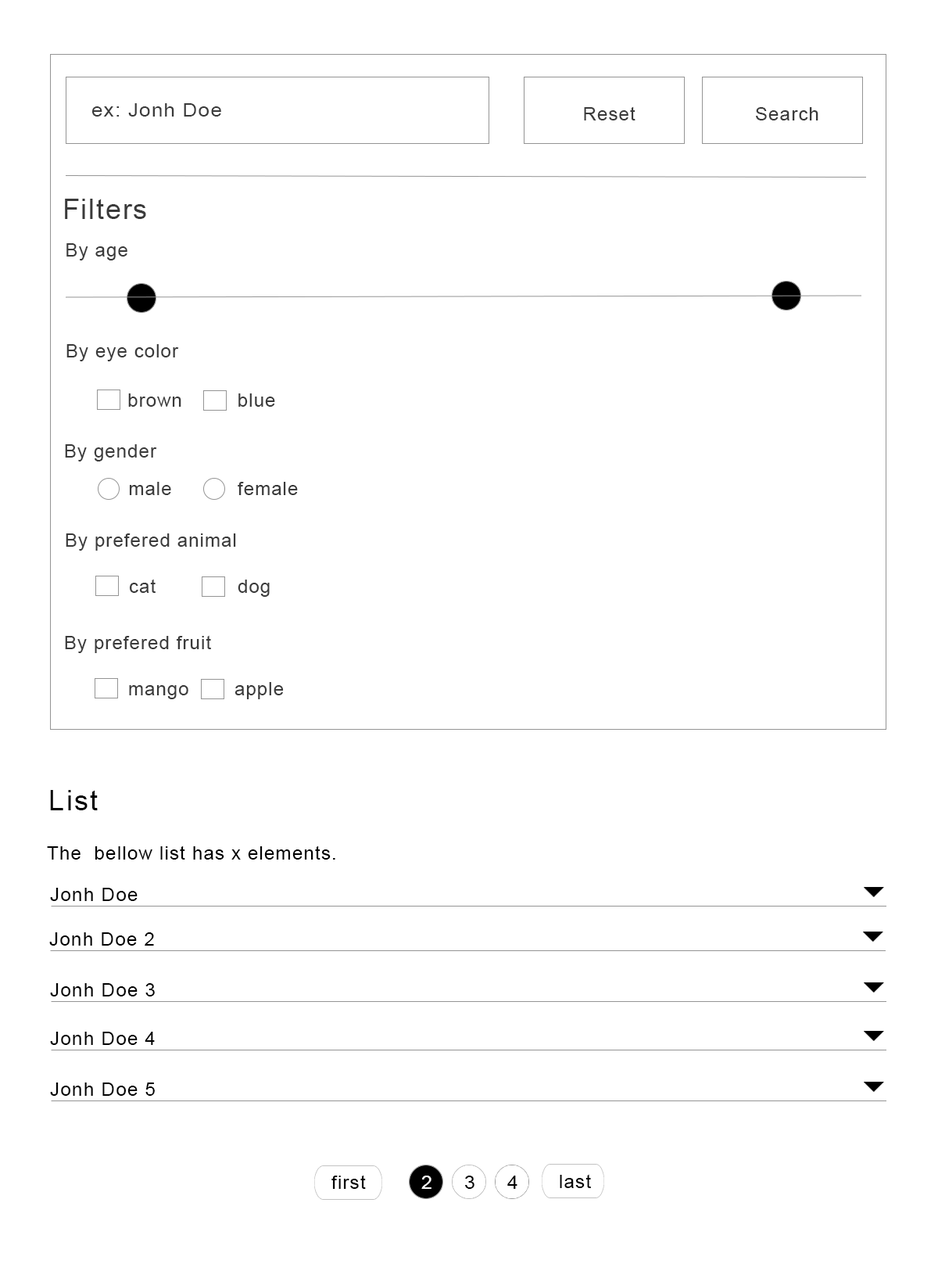
<style>
.page{position:relative;width:938px;height:1271px;background:#ffffff}
.page>*{position:absolute;margin:0}
.t1{font:18.8px "ArialMT";letter-spacing:0.05em;color:#3a3a3a;scale:1.08 1}
.t2{font:18.8px "ArialMT";letter-spacing:0.05em;color:#3a3a3a}
.t3{font:28.2px "ArialMT";letter-spacing:0.05em;color:#3a3a3a}
.t4{font:18.6px "ArialMT";letter-spacing:0.05em;color:#3a3a3a}
.t5{font:28.2px "ArialMT";letter-spacing:0.05em;color:#000000}
.t6{font:18.8px "ArialMT";letter-spacing:0.05em;color:#000000}
.t7{font:18.5px "ArialMT";letter-spacing:0.05em;color:#ffffff;scale:1.05 1}
.t8{font:18.5px "ArialMT";letter-spacing:0.05em;color:#000000;scale:1.05 1}
</style>
<div class="page">
<p class="t1" style="left:92px;top:103px;width:129px;height:14px">ex: Jonh Doe</p>
<p class="t2" style="left:584px;top:106px;width:52px;height:14px">Reset</p>
<p class="t2" style="left:756px;top:107px;width:63px;height:13px">Search</p>
<p class="t3" style="left:65px;top:199px;width:81px;height:20px">Filters</p>
<p class="t2" style="left:66px;top:243px;width:61px;height:17px">By age</p>
<p class="t4" style="left:66px;top:344px;width:113px;height:17px">By eye color</p>
<p class="t4" style="left:128px;top:393px;width:53px;height:14px">brown</p>
<p class="t4" style="left:239px;top:393px;width:36px;height:14px">blue</p>
<p class="t4" style="left:65px;top:444px;width:92px;height:17px">By gender</p>
<p class="t4" style="left:129px;top:482px;width:42px;height:13px">male</p>
<p class="t4" style="left:238px;top:482px;width:60px;height:13px">female</p>
<p class="t4" style="left:66px;top:533px;width:170px;height:18px">By prefered animal</p>
<p class="t4" style="left:129px;top:579px;width:27px;height:14px">cat</p>
<p class="t4" style="left:238px;top:579px;width:32px;height:18px">dog</p>
<p class="t4" style="left:65px;top:635px;width:146px;height:18px">By prefered fruit</p>
<p class="t4" style="left:129px;top:685px;width:59px;height:14px">mango</p>
<p class="t4" style="left:235px;top:682px;width:49px;height:17px">apple</p>
<p class="t5" style="left:50px;top:790px;width:48px;height:20px">List</p>
<p class="t6" style="left:47px;top:845px;width:288px;height:14px">The  bellow list has x elements.</p>
<p class="t6" style="left:50px;top:888px;width:88px;height:13px">Jonh Doe</p>
<p class="t6" style="left:49px;top:932px;width:105px;height:13px">Jonh Doe 2</p>
<p class="t6" style="left:50px;top:983px;width:105px;height:13px">Jonh Doe 3</p>
<p class="t6" style="left:50px;top:1031px;width:105px;height:14px">Jonh Doe 4</p>
<p class="t6" style="left:50px;top:1082px;width:105px;height:14px">Jonh Doe 5</p>
<p class="t6" style="left:332px;top:1175px;width:34px;height:14px">first</p>
<p class="t7" style="left:421px;top:1175px;width:11px;height:14px">2</p>
<p class="t8" style="left:465px;top:1175px;width:10px;height:14px">3</p>
<p class="t8" style="left:508px;top:1175px;width:10px;height:14px">4</p>
<p class="t6" style="left:560px;top:1174px;width:31px;height:14px">last</p>
</div>
